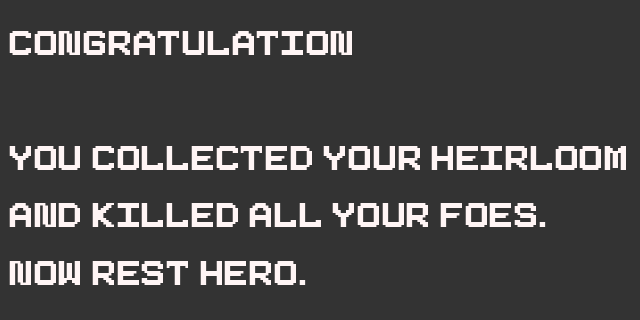
<style>
.page{position:relative;width:640px;height:320px;background:#333333}
.page>*{position:absolute;margin:0}
.t1{font:48px "Pixeboy";color:#fff5f5;scale:1.1 1}
</style>
<div class="page">
<p class="t1" style="left:9px;top:31px;width:617px;height:254px">Congratulation<br><br>YOu collected your heirloom<br>And killed all your foes.<br>Now rest hero.</p>
</div>
